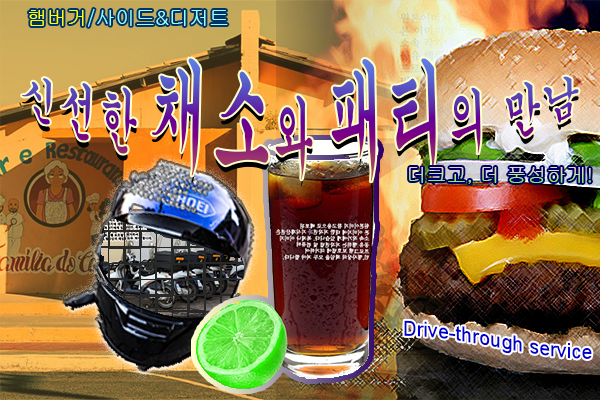
<style>
.page{position:relative;width:600px;height:400px}
.page>*{position:absolute;margin:0}
.t1{font:20px "Gulim";color:#99ffff}
.t2{font:20px "Gulim";color:#ffff00}
.t3{font:40px/595.2px "Gungsuh"}
.t4{font:60px/595.2px "Gungsuh"}
.t5{font:20px "Gulim"}
.t6{font:20px/595.2px "ArialMT";color:#0000cc}
</style>
<div class="page">
<p class="t1" style="left:29px;top:8px;width:199px;height:19px"><span class="t2">햄버거</span>/사이드&amp;디저트</p>
<p class="t3" style="left:22px;top:58px;width:557px;height:124px">신선한 <span class="t4">채소</span>와 <span class="t4">패티</span>의 만남</p>
<p class="t5" style="left:409px;top:167px;width:182px;height:17px">더크고, 더 풍성하게!</p>
<p class="t6" style="left:404px;top:320px;width:188px;height:39px">Drive-through service</p>
</div>
